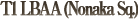
<style>
.page{position:relative;width:138px;height:19px;background:#ffffff}
.page>*{position:absolute;margin:0}
.t1{font:18px "RyuminPro-ExBold";letter-spacing:-0.13em;color:#4a3f32;font-weight:bold;scale:0.85 1}
</style>
<div class="page">
<p class="t1" style="left:0px;top:1px;width:139px;height:18px">T1 LBAA (Nonaka Sq.)</p>
</div>
